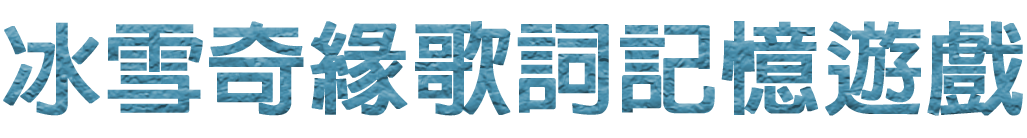
<style>
.page{position:relative;width:1027px;height:138px;background:#ffffff}
.page>*{position:absolute;margin:0}
.t1{font:100px "AdobeFanHeitiStd-Bold";font-weight:bold}
</style>
<div class="page">
<p class="t1" style="left:3px;top:21px;width:1020px;height:95px">冰雪奇緣歌詞記憶遊戲</p>
</div>
